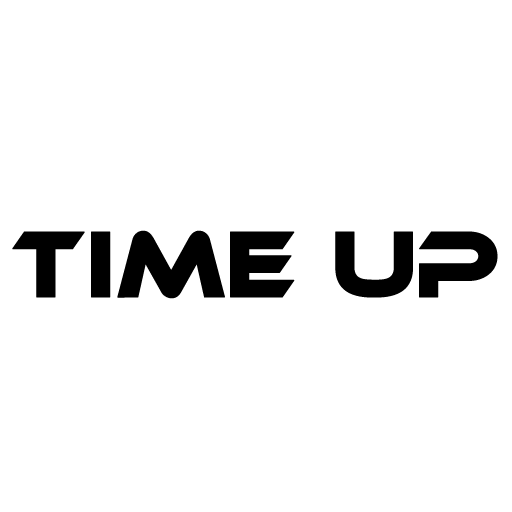
<style>
.page{position:relative;width:512px;height:512px;background:#ffffff}
.page>*{position:absolute;margin:0}
.t1{font:90px "Ethnocentric";color:#000000;font-weight:bold;scale:0.9 1}
</style>
<div class="page">
<p class="t1" style="left:12px;top:230px;width:486px;height:69px">TIME UP</p>
</div>
